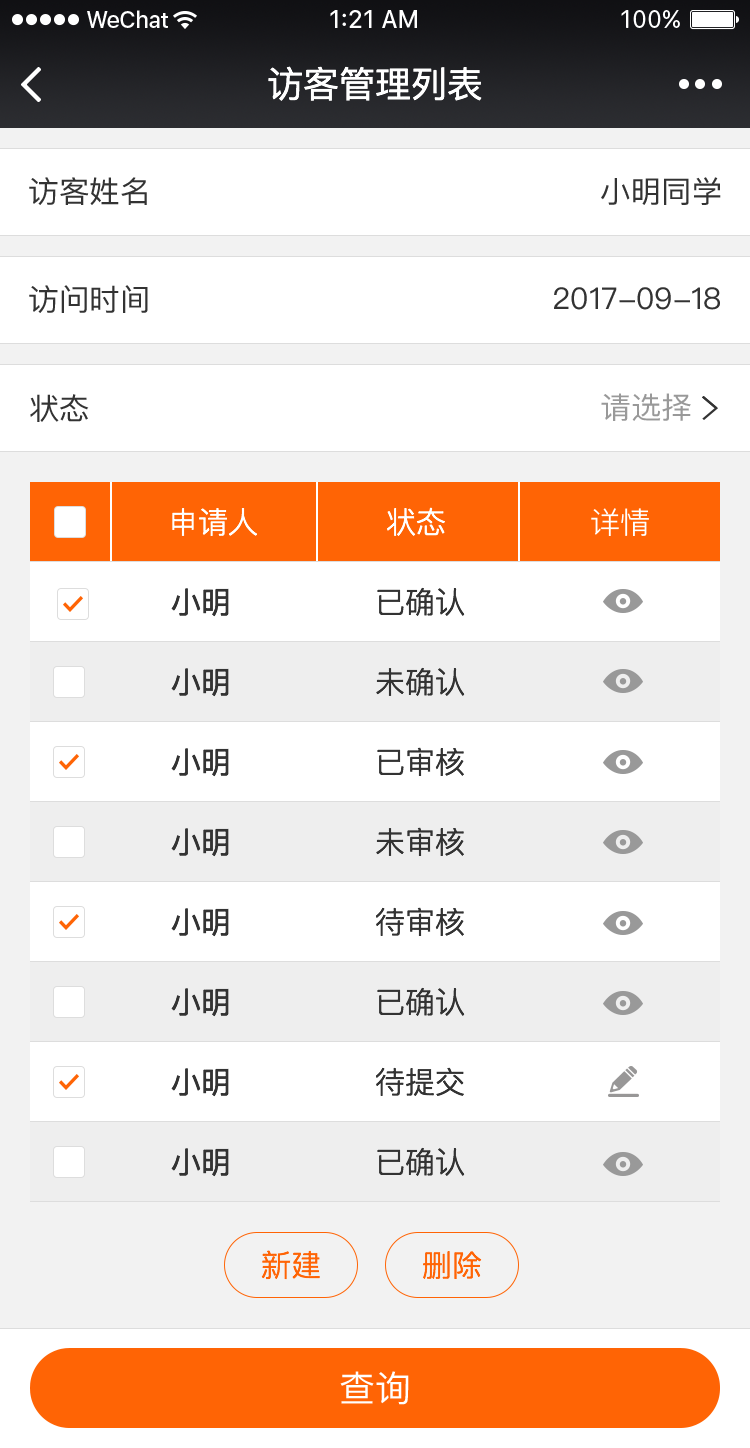
<style>
.page{position:relative;width:750px;height:1448px;background:#ffffff}
.page>*{position:absolute;margin:0}
.t1{font:36px "PingFangSC-Regular";color:#ffffff}
.t2{font:30px "PingFangSC-Regular";color:#333333}
.t3{font:30px "PingFang-SC-Medium";color:#333333}
.t4{font:29.9px "PingFangSC-Regular";color:#333333}
.t5{font:30px "PingFang-SC-Medium";color:#999999}
.t6{font:30px "PingFangSC-Light";color:#ffffff}
.t7{font:30px "PingFangSC-Light";color:#333333}
.t8{font:30px "PingFangSC-Light";color:#ff6405}
</style>
<div class="page">
<p class="t1" style="left:268px;top:66px;width:214px;height:35px">访客管理列表</p>
<p class="t2" style="left:29px;top:177px;width:118px;height:28px">访客姓名</p>
<p class="t3" style="left:601px;top:177px;width:120px;height:28px">小明同学</p>
<p class="t2" style="left:29px;top:285px;width:119px;height:28px">访问时间</p>
<p class="t2" style="left:554px;top:287px;width:166px;height:23px">2017-09-18</p>
<p class="t4" style="left:30px;top:394px;width:59px;height:28px">状态</p>
<p class="t5" style="left:601px;top:393px;width:90px;height:28px">请选择</p>
<p class="t6" style="left:172px;top:508px;width:85px;height:28px">申请人</p>
<p class="t6" style="left:387px;top:507px;width:58px;height:29px">状态</p>
<p class="t6" style="left:591px;top:508px;width:58px;height:28px">详情</p>
<p class="t2" style="left:171px;top:588px;width:58px;height:29px">小明</p>
<p class="t7" style="left:377px;top:587px;width:88px;height:29px">已确认</p>
<p class="t2" style="left:171px;top:668px;width:58px;height:29px">小明</p>
<p class="t7" style="left:376px;top:667px;width:89px;height:29px">未确认</p>
<p class="t2" style="left:171px;top:748px;width:58px;height:29px">小明</p>
<p class="t7" style="left:377px;top:747px;width:87px;height:29px">已审核</p>
<p class="t2" style="left:171px;top:828px;width:58px;height:29px">小明</p>
<p class="t7" style="left:376px;top:827px;width:88px;height:29px">未审核</p>
<p class="t2" style="left:171px;top:908px;width:58px;height:29px">小明</p>
<p class="t7" style="left:376px;top:907px;width:88px;height:29px">待审核</p>
<p class="t2" style="left:171px;top:988px;width:58px;height:29px">小明</p>
<p class="t7" style="left:377px;top:987px;width:88px;height:29px">已确认</p>
<p class="t2" style="left:171px;top:1068px;width:58px;height:29px">小明</p>
<p class="t7" style="left:376px;top:1067px;width:88px;height:29px">待提交</p>
<p class="t2" style="left:171px;top:1148px;width:58px;height:29px">小明</p>
<p class="t7" style="left:377px;top:1147px;width:88px;height:29px">已确认</p>
<p class="t8" style="left:261px;top:1250px;width:59px;height:30px">新建</p>
<p class="t8" style="left:423px;top:1251px;width:59px;height:28px">删除</p>
<p class="t1" style="left:340px;top:1371px;width:69px;height:34px">查询</p>
</div>
